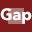
<style>
.page{position:relative;width:32px;height:32px;background:#821b1b}
.page>*{position:absolute;margin:0}
.t1{font:16px "AvenirNext-Bold";letter-spacing:-0.005em;color:#ffffff}
</style>
<div class="page">
<p class="t1" style="left:0px;top:8px;width:32px;height:16px">Gap</p>
</div>
